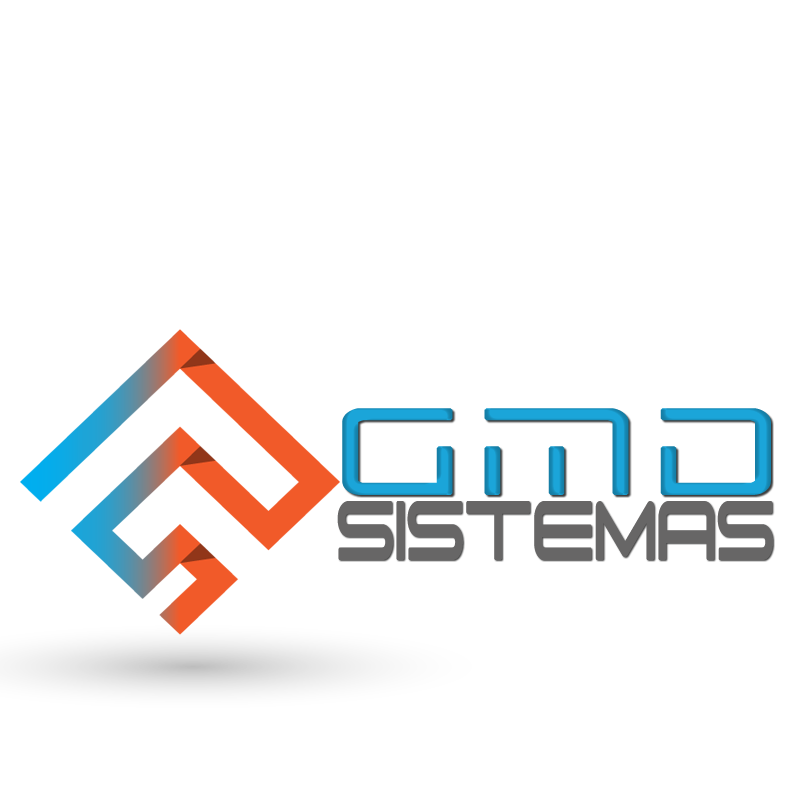
<style>
.page{position:relative;width:800px;height:800px;background:#ffffff}
.page>*{position:absolute;margin:0}
.t1{font:127.5px "BansheePilot";letter-spacing:0.069em;color:#1ba5d9;font-weight:bold;scale:1.07 1}
.t2{font:103.2px "Suissnord";color:#676666;font-weight:bold;scale:0.6 1}
</style>
<div class="page">
<p class="t1" style="left:342px;top:408px;width:429px;height:87px">gMD</p>
<p class="t2" style="left:337px;top:501px;width:436px;height:59px">SISTEMAS</p>
</div>
